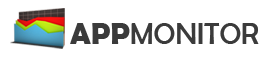
<style>
.page{position:relative;width:271px;height:60px;background:#ffffff}
.page>*{position:absolute;margin:0}
.t1{font:30px "BerlinSansFB-Reg";color:#3b3b3b}
.t2{font:30px "BerlinSansFBDemi-Bold";color:#3b3b3b}
</style>
<div class="page">
<p class="t1" style="left:70px;top:23px;width:189px;height:21px"><span class="t2">APP</span>MONITOR</p>
</div>
